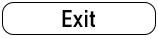
<style>
.page{position:relative;width:158px;height:38px;background:#ffffff}
.page>*{position:absolute;margin:0}
.t1{font:24px "Bahnschrift-SemiBoldSemiCondensed";color:#000000}
</style>
<div class="page">
<p class="t1" style="left:62px;top:10px;width:33px;height:17px">Exit</p>
</div>
